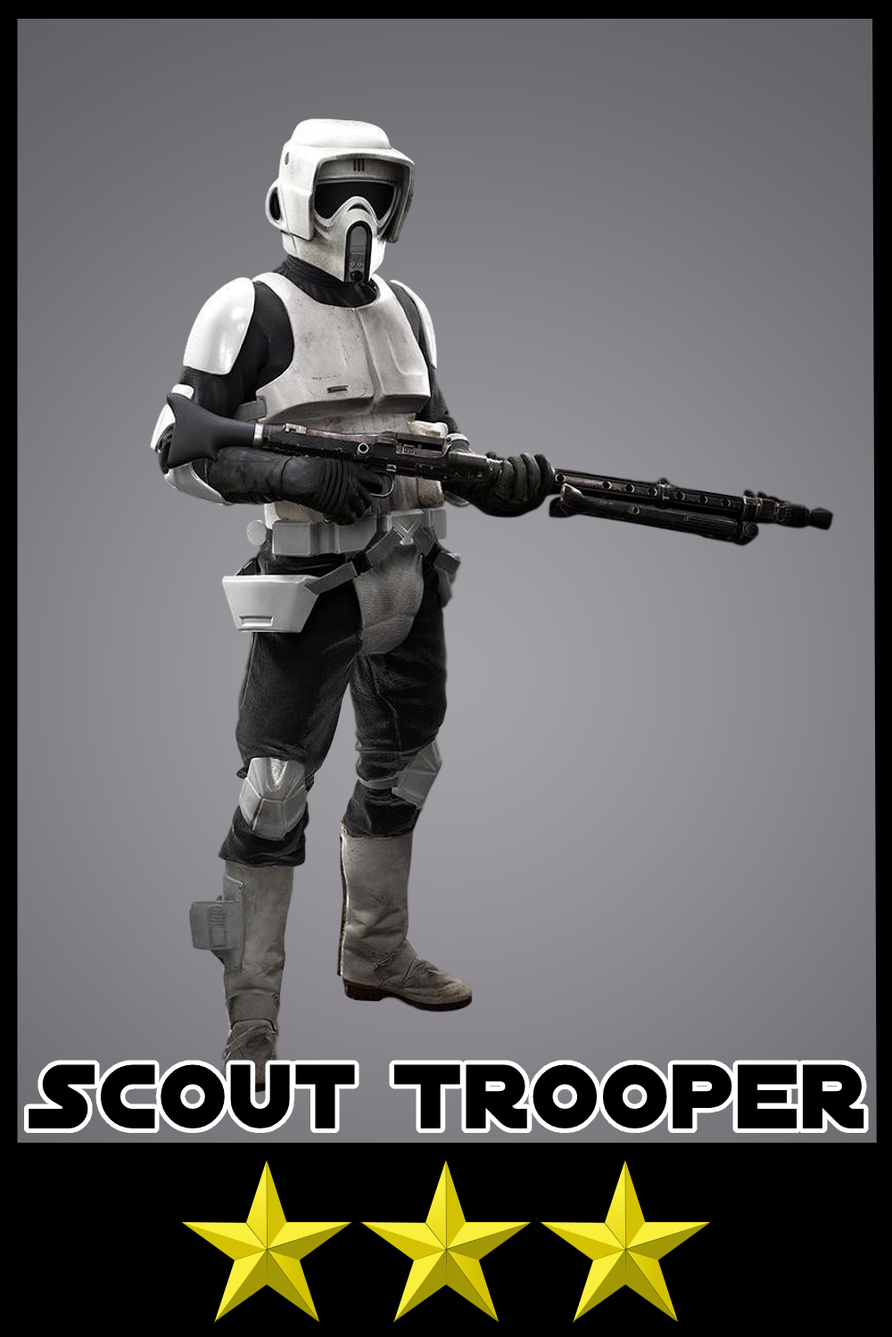
<style>
.page{position:relative;width:892px;height:1337px}
.page>*{position:absolute;margin:0}
.t1{font:98.1px "DistantGalaxy";letter-spacing:0.012em;color:#000000}
</style>
<div class="page">
<p class="t1" style="left:29px;top:1065px;width:835px;height:64px">Scout Trooper</p>
</div>
